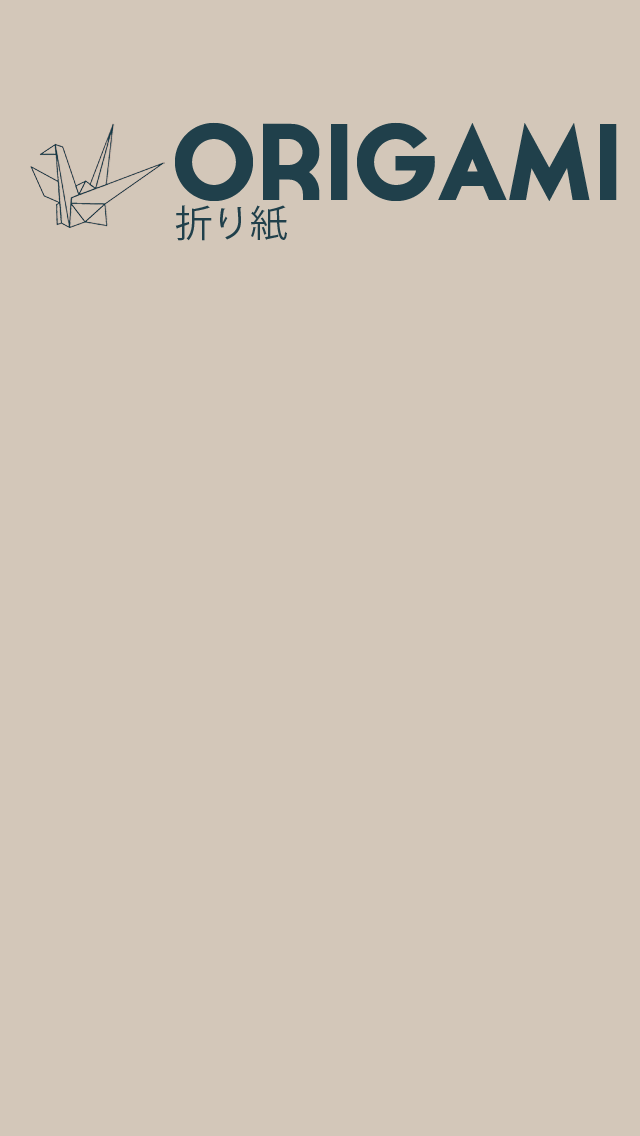
<style>
.page{position:relative;width:640px;height:1136px;background:#d3c7b9}
.page>*{position:absolute;margin:0}
.t1{font:108.3px "Cassannet-Bold";color:#20404b}
.t2{font:37.5px "KozGoPr6N-Regular";color:#20404b}
</style>
<div class="page">
<p class="t1" style="left:175px;top:122px;width:442px;height:79px">ORIGAMI</p>
<p class="t2" style="left:175px;top:205px;width:112px;height:36px">折り紙</p>
</div>
